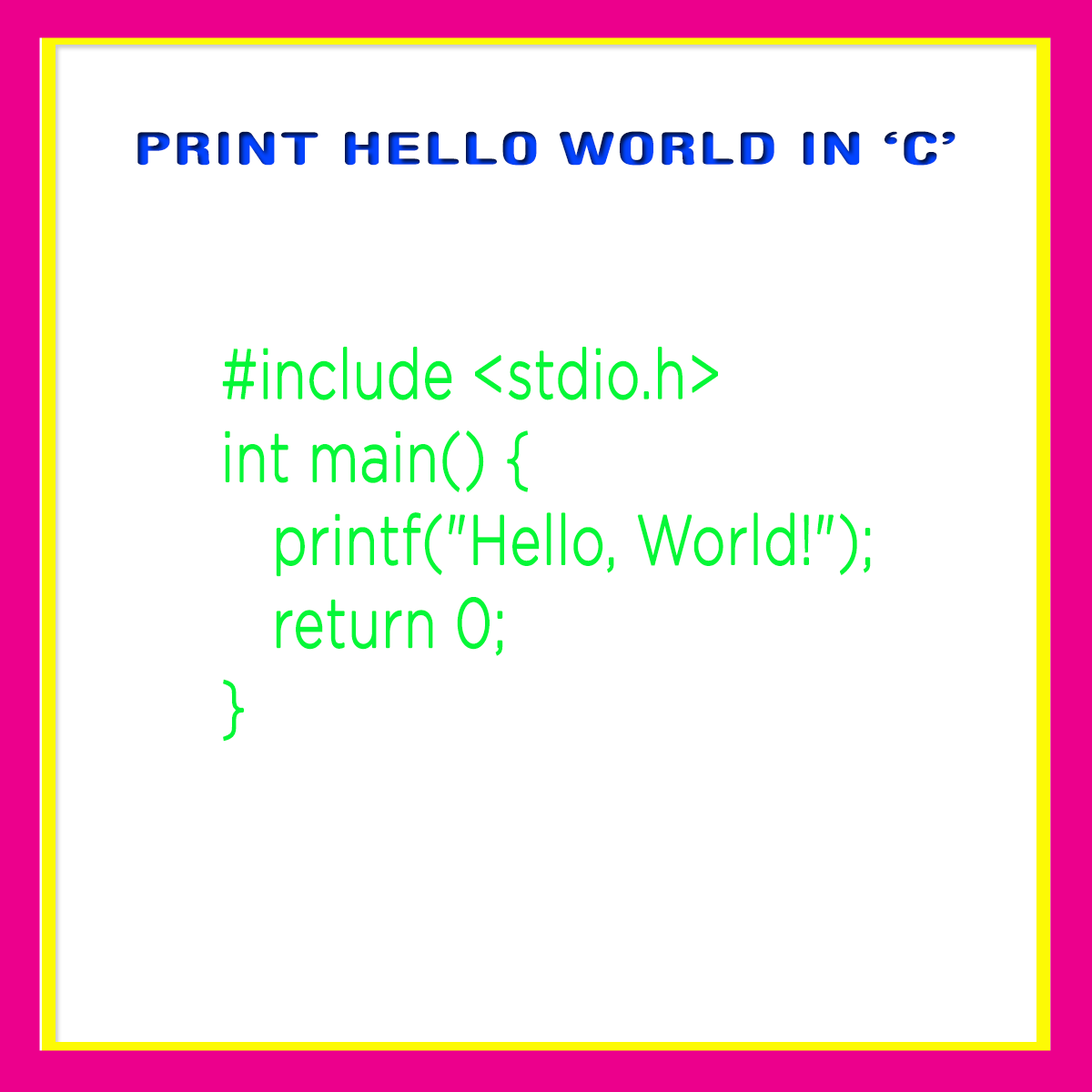
<style>
.page{position:relative;width:1092px;height:1092px;background:#ffffff}
.page>*{position:absolute;margin:0}
.t1{font:44.4px "HelveticaRoundedLTStd-BdCn";text-transform:uppercase;font-weight:bold;scale:1.69 1}
.t2{font:69.1px "Gotham-Light";color:#05f738;font-weight:bold;scale:0.76 1}
</style>
<div class="page">
<p class="t1" style="left:137px;top:131px;width:818px;height:35px">Print Hello World In ‘C’</p>
<p class="t2" style="left:222px;top:347px;width:649px;height:395px">#include &lt;stdio.h&gt;<br>int main() {<br>   printf("Hello, World!");<br>   return 0;<br>}</p>
</div>
